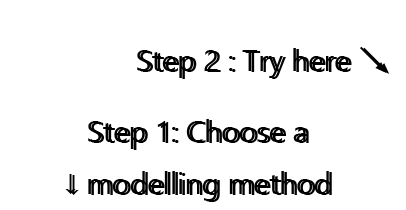
<style>
.page{position:relative;width:406px;height:210px;background:#ffffff}
.page>*{position:absolute;margin:0}
.t1{font:30px "SegoeUI";color:#000000}
.t2{font:30px "AdobeHeitiStd-Regular";color:#000000}
.t3{font:30px "SegoeUI-Bold";color:#000000}
</style>
<div class="page">
<p class="t1" style="left:137px;top:46px;width:250px;height:32px">Step 2 : Try here <span class="t2">↘</span></p>
<p class="t1" style="left:140px;top:47px;width:250px;height:32px">Step 2 : Try here <span class="t2">↘</span></p>
<p class="t1" style="left:65px;top:119px;width:264px;height:82px;text-align:center">Step 1: Choose a <br><span class="t3">↓</span> modelling method</p>
<p class="t1" style="left:68px;top:120px;width:264px;height:82px;text-align:center">Step 1: Choose a <br><span class="t3">↓</span> modelling method</p>
</div>
